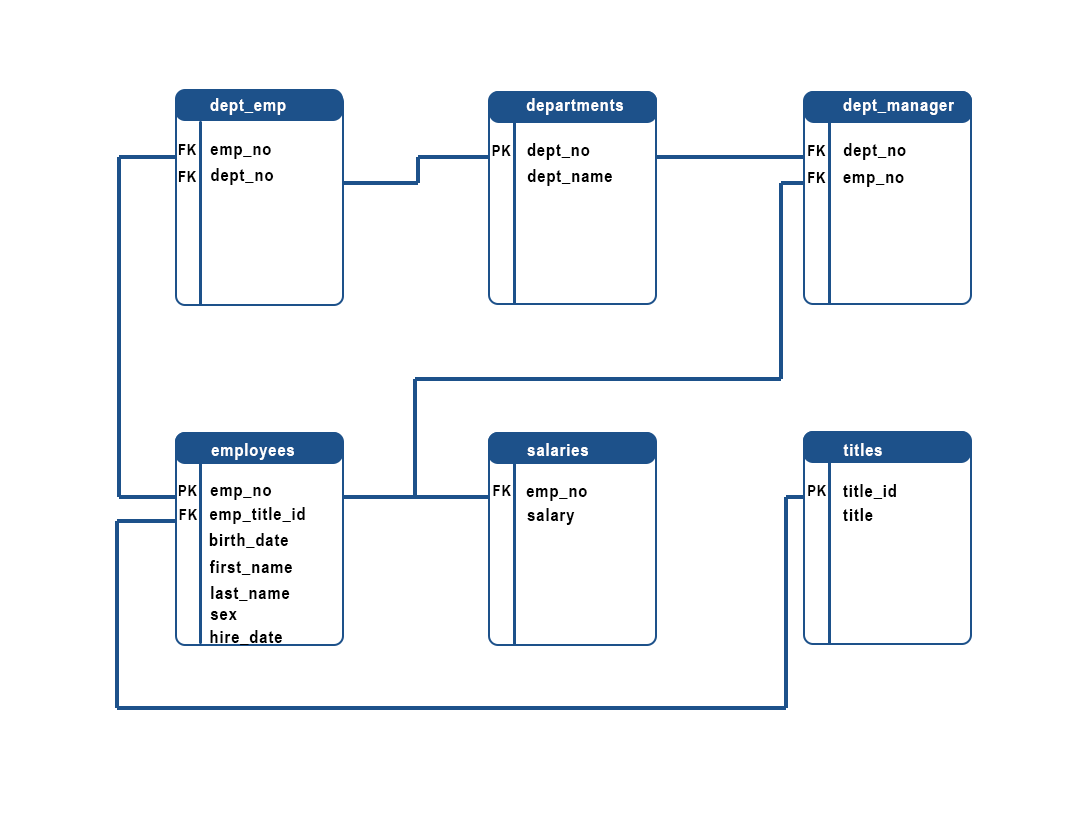
<style>
.page{position:relative;width:1072px;height:838px;background:#ffffff}
.page>*{position:absolute;margin:0}
.t1{font:18px "ArialNarrow-Bold";letter-spacing:0.05em;color:#ffffff}
.t2{font:16px "ArialNarrow-Bold";letter-spacing:0.05em;color:#000000}
.t3{font:18px "ArialNarrow-Bold";letter-spacing:0.05em;color:#000000}
</style>
<div class="page">
<p class="t1" style="left:210px;top:98px;width:76px;height:17px">dept_emp</p>
<p class="t1" style="left:526px;top:98px;width:97px;height:17px">departments</p>
<p class="t1" style="left:843px;top:98px;width:111px;height:17px">dept_manager</p>
<p class="t2" style="left:178px;top:144px;width:18px;height:11px">FK</p>
<p class="t3" style="left:210px;top:146px;width:61px;height:13px">emp_no</p>
<p class="t2" style="left:492px;top:145px;width:19px;height:11px">PK</p>
<p class="t3" style="left:527px;top:143px;width:63px;height:17px">dept_no</p>
<p class="t2" style="left:808px;top:145px;width:18px;height:11px">FK</p>
<p class="t3" style="left:843px;top:143px;width:63px;height:17px">dept_no</p>
<p class="t2" style="left:178px;top:171px;width:18px;height:11px">FK</p>
<p class="t3" style="left:211px;top:168px;width:63px;height:17px">dept_no</p>
<p class="t3" style="left:527px;top:169px;width:85px;height:17px">dept_name</p>
<p class="t2" style="left:808px;top:172px;width:18px;height:11px">FK</p>
<p class="t3" style="left:843px;top:174px;width:61px;height:13px">emp_no</p>
<p class="t1" style="left:211px;top:443px;width:83px;height:17px">employees</p>
<p class="t1" style="left:527px;top:443px;width:61px;height:13px">salaries</p>
<p class="t1" style="left:843px;top:443px;width:39px;height:13px">titles</p>
<p class="t2" style="left:178px;top:485px;width:19px;height:11px">PK</p>
<p class="t2" style="left:493px;top:485px;width:18px;height:11px">FK</p>
<p class="t2" style="left:808px;top:485px;width:18px;height:11px">PK</p>
<p class="t3" style="left:843px;top:484px;width:53px;height:15px">title_id</p>
<p class="t3" style="left:210px;top:487px;width:62px;height:13px">emp_no</p>
<p class="t3" style="left:526px;top:488px;width:61px;height:13px">emp_no</p>
<p class="t2" style="left:179px;top:509px;width:18px;height:11px">FK</p>
<p class="t3" style="left:209px;top:507px;width:96px;height:17px">emp_title_id</p>
<p class="t3" style="left:527px;top:508px;width:48px;height:17px">salary</p>
<p class="t3" style="left:843px;top:508px;width:30px;height:13px">title</p>
<p class="t3" style="left:209px;top:533px;width:79px;height:15px">birth_date</p>
<p class="t3" style="left:209px;top:560px;width:83px;height:15px">first_name</p>
<p class="t3" style="left:211px;top:586px;width:79px;height:15px">last_name</p>
<p class="t3" style="left:210px;top:611px;width:27px;height:9px">sex</p>
<p class="t3" style="left:210px;top:630px;width:72px;height:15px">hire_date</p>
</div>
